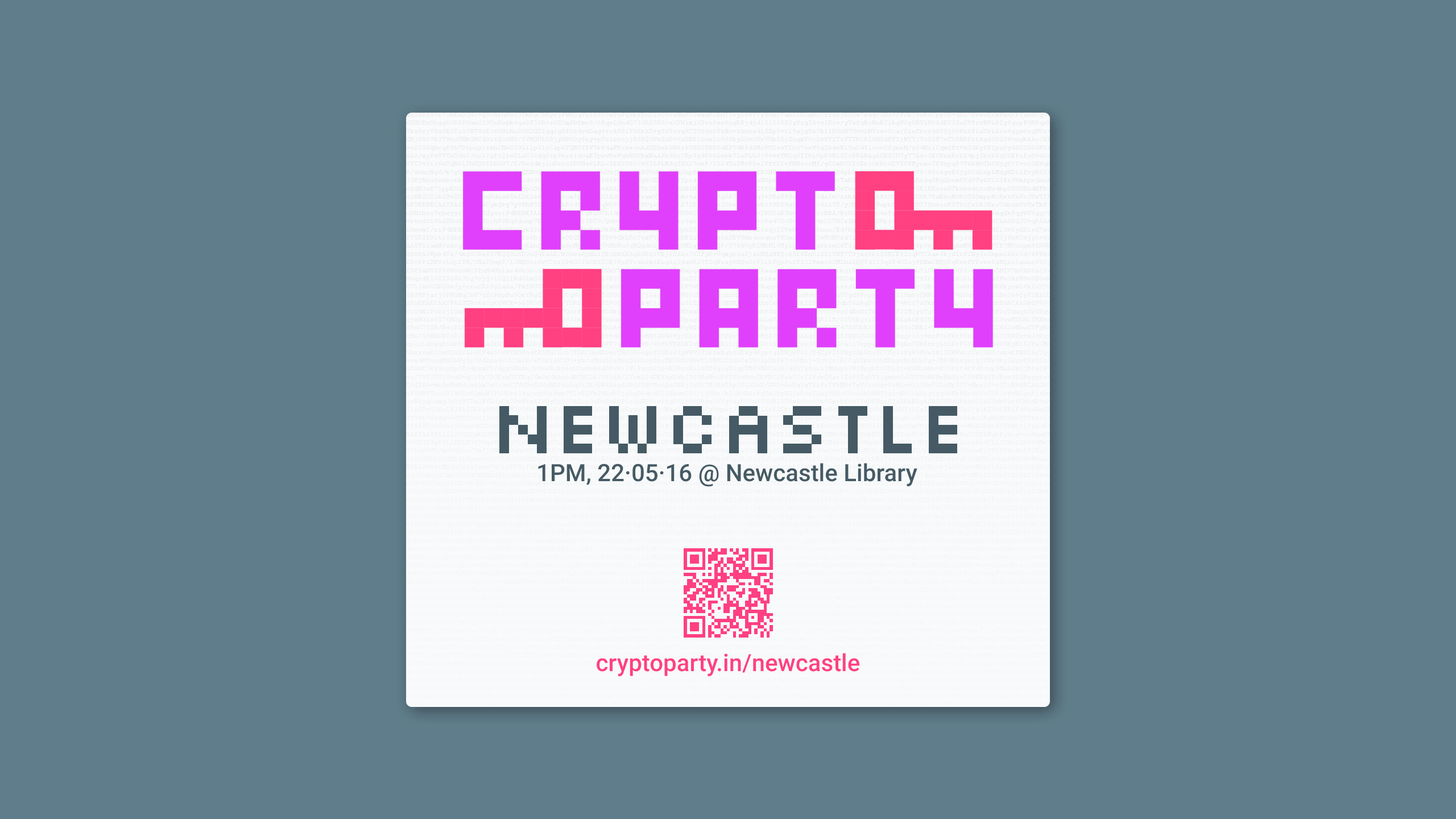
<style>
.page{position:relative;width:1456px;height:819px;background:#607d8b}
.page>*{position:absolute;margin:0}
.t1{font:79.6px "Silkscreen";letter-spacing:-0.025em;color:#455a64}
.t2{font:23.9px "Roboto-Medium";color:#455a64}
.t3{font:23.9px "Roboto-Medium";color:#ff4081}
</style>
<div class="page">
<p class="t1" style="left:499px;top:406px;width:458px;height:47px">NEWCASTLE</p>
<p class="t2" style="left:538px;top:463px;width:379px;height:24px">1PM, 22·05·16 @ Newcastle Library</p>
<p class="t3" style="left:597px;top:653px;width:262px;height:23px">cryptoparty.in/newcastle</p>
</div>
